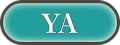
<style>
.page{position:relative;width:120px;height:45px;background:#239e9f}
.page>*{position:absolute;margin:0}
.t1{font:26px "RyuminPro-ExBold";letter-spacing:-0.08em;color:#fdfbf9}
</style>
<div class="page">
<p class="t1" style="left:41px;top:13px;width:37px;height:20px">YA</p>
</div>
